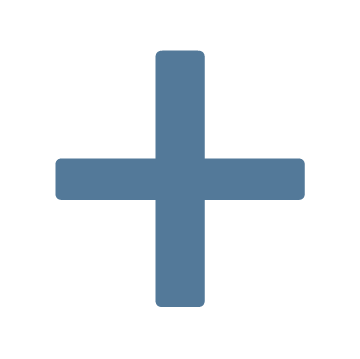
<style>
.page{position:relative;width:360px;height:359px;background:#ffffff}
.page>*{position:absolute;margin:0}
.t1{font:700px "EideticNeoOmni";color:#537999}
</style>
<div class="page">
<p class="t1" style="left:55px;top:50px;width:250px;height:257px">+</p>
</div>
